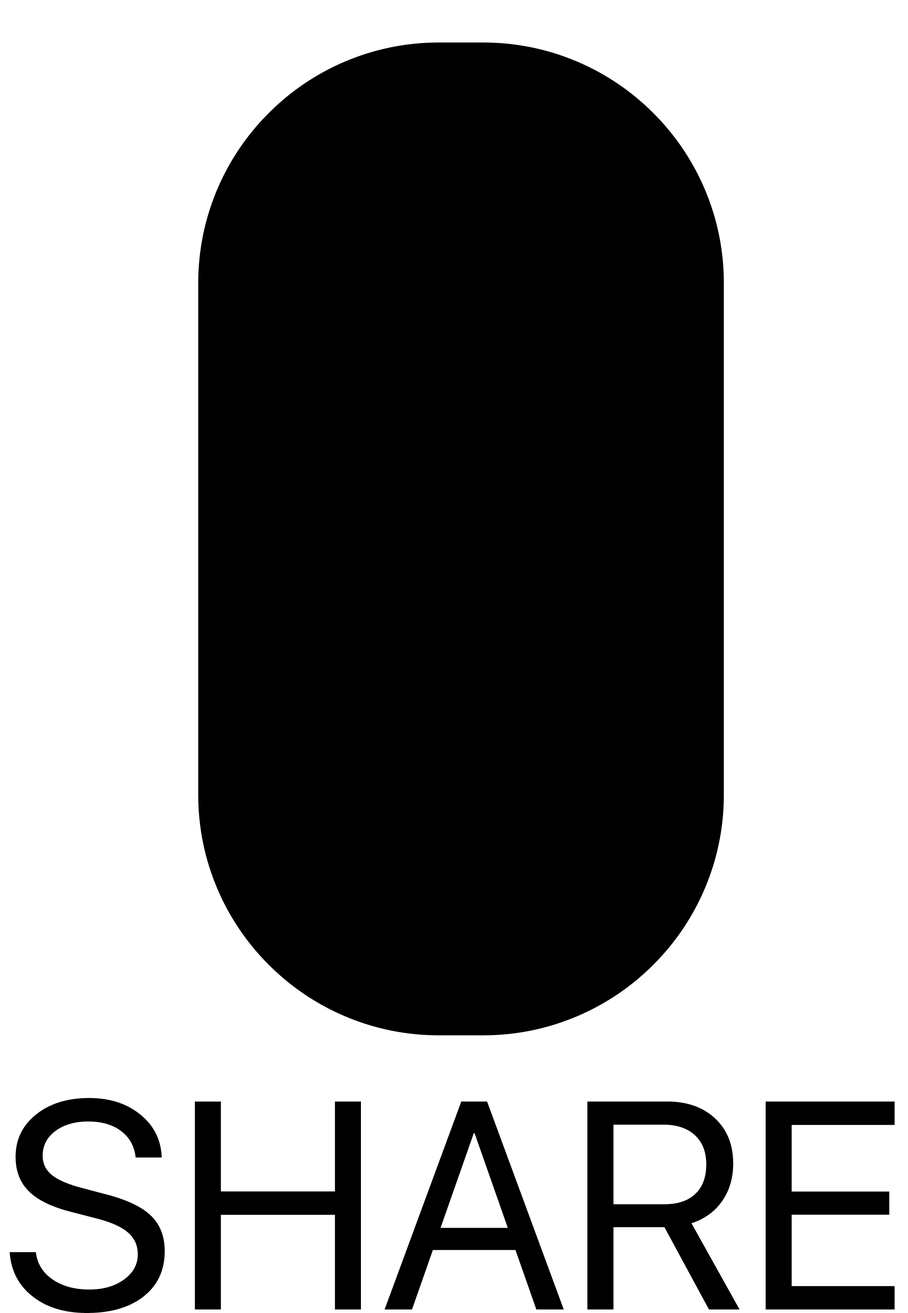
<style>
.page{position:relative;width:908px;height:1313px;background:#ffffff}
.page>*{position:absolute;margin:0}
.t1{font:295.1px "SFUIDisplay-Regular";color:#000000}
</style>
<div class="page">
<p class="t1" style="left:10px;top:1098px;width:885px;height:215px">SHARE</p>
</div>
